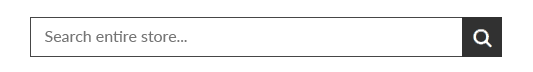
<style>
.page{position:relative;width:533px;height:72px;background:#ffffff}
.page>*{position:absolute;margin:0}
.t1{font:16px "Lato-Regular";color:#757575}
.t2{font:16px "Lato-Regular";color:#757575;text-transform:uppercase}
</style>
<div class="page">
<p class="t1" style="left:45px;top:31px;width:142px;height:11px"><span class="t2">S</span>earch entire store...</p>
</div>
